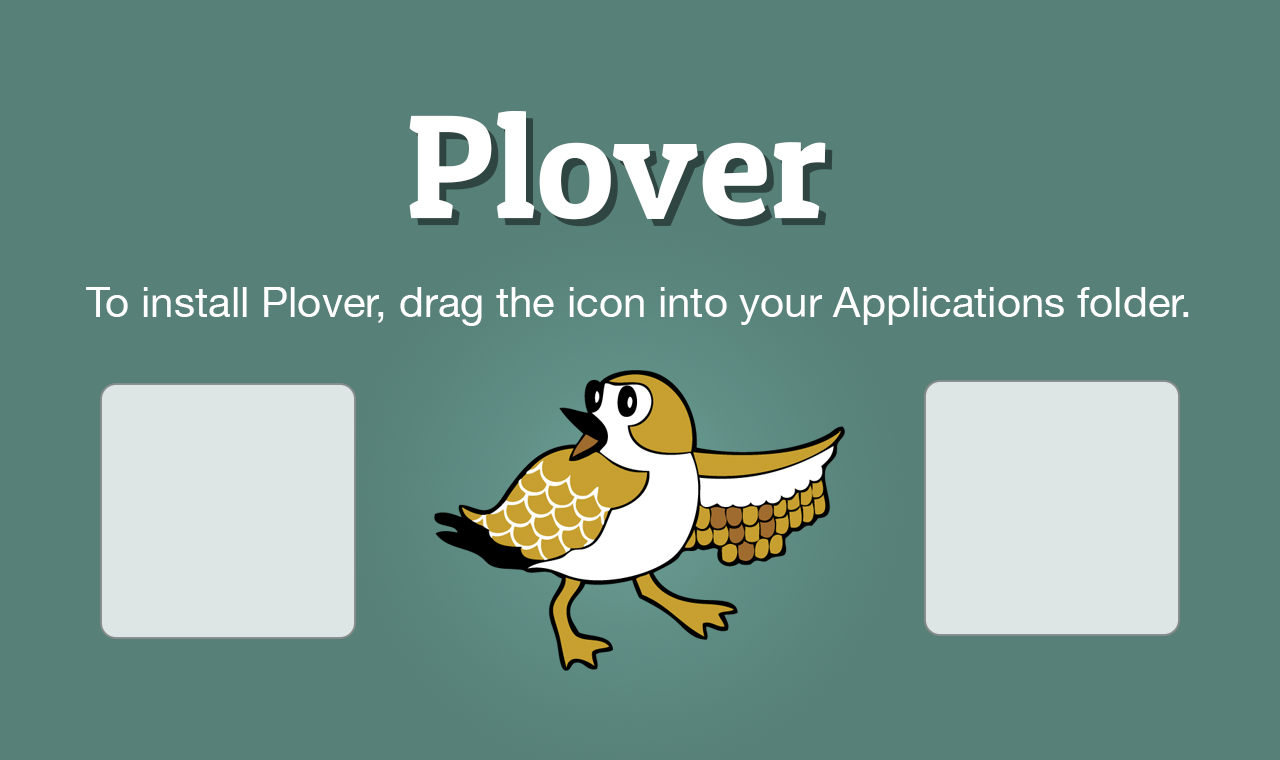
<style>
.page{position:relative;width:1280px;height:760px;background:#568078}
.page>*{position:absolute;margin:0}
.t1{font:148px "PatuaOne-Regular";color:#ffffff}
.t2{font:42px "HelveticaNeue";color:#ffffff}
</style>
<div class="page">
<p class="t1" style="left:409px;top:111px;width:417px;height:109px">Plover</p>
<p class="t2" style="left:86px;top:287px;width:1103px;height:39px">To install Plover, drag the icon into your Applications folder.</p>
</div>
